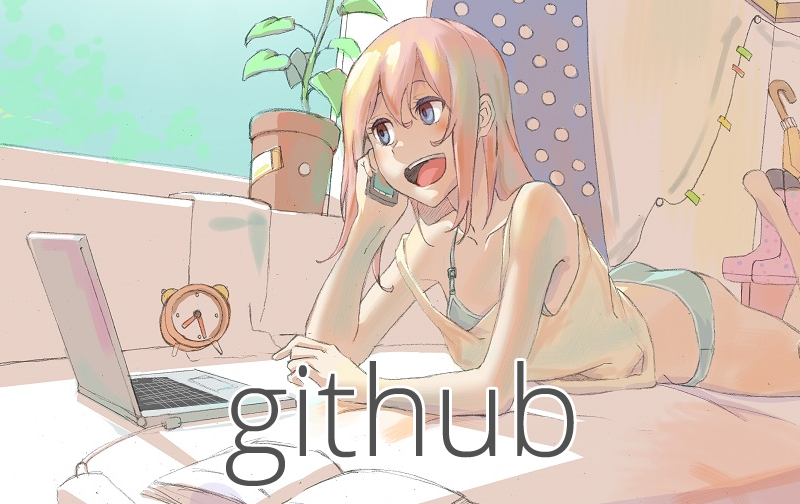
<style>
.page{position:relative;width:800px;height:504px}
.page>*{position:absolute;margin:0}
.t1{font:125px "OpenSans-Light";color:#515151}
</style>
<div class="page">
<p class="t1" style="left:226px;top:361px;width:348px;height:125px">github</p>
</div>
